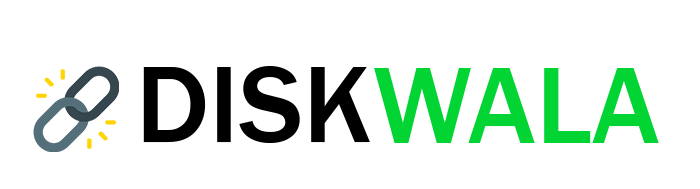
<style>
.page{position:relative;width:700px;height:189px;background:#ffffff}
.page>*{position:absolute;margin:0}
.t1{font:112.5px "FranklinGothic-Medium";color:#000000}
.t2{font:112.5px "FranklinGothic-Medium";color:#02d433}
</style>
<div class="page">
<p class="t1" style="left:143px;top:66px;width:227px;height:77px">DISK</p>
<p class="t2" style="left:374px;top:68px;width:285px;height:75px">WALA</p>
</div>
